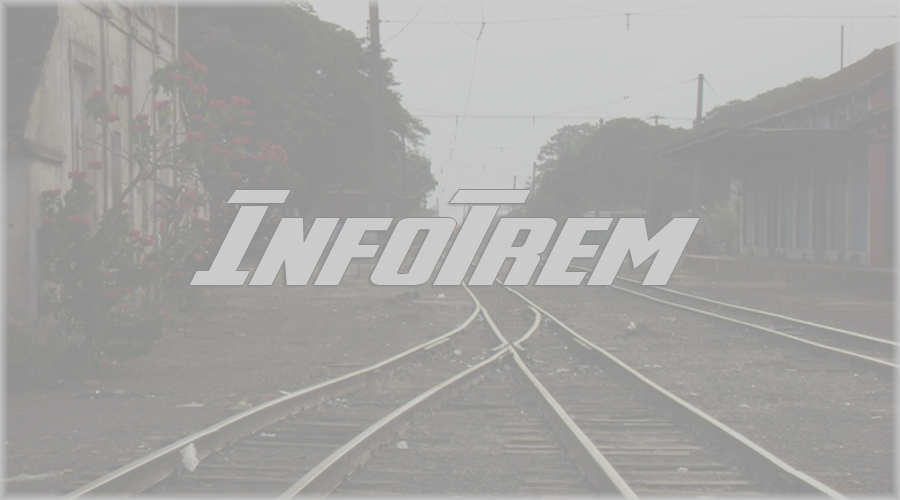
<style>
.page{position:relative;width:900px;height:500px}
.page>*{position:absolute;margin:0}
.t1{font:92.4px "AvengeanceHeroicAvengerNormal";color:#cbcbcb;scale:1.7 1}
</style>
<div class="page">
<p class="t1" style="left:189px;top:190px;width:511px;height:95px">InfoTrem</p>
</div>
